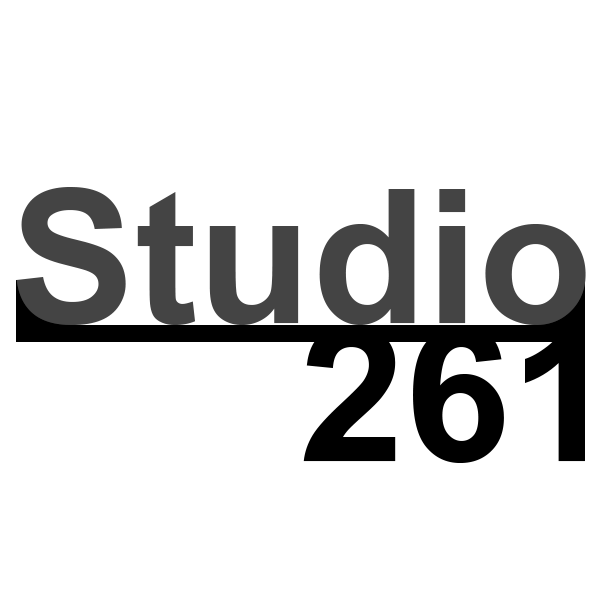
<style>
.page{position:relative;width:600px;height:600px;background:#ffffff}
.page>*{position:absolute;margin:0}
.t1{font:187.1px "Arial-BoldMT";color:#444444}
.t2{font:190px "Arial-BoldMT";color:#000000}
</style>
<div class="page">
<p class="t1" style="left:16px;top:187px;width:570px;height:138px">Studio</p>
<p class="t2" style="left:303px;top:325px;width:282px;height:138px">261</p>
</div>
